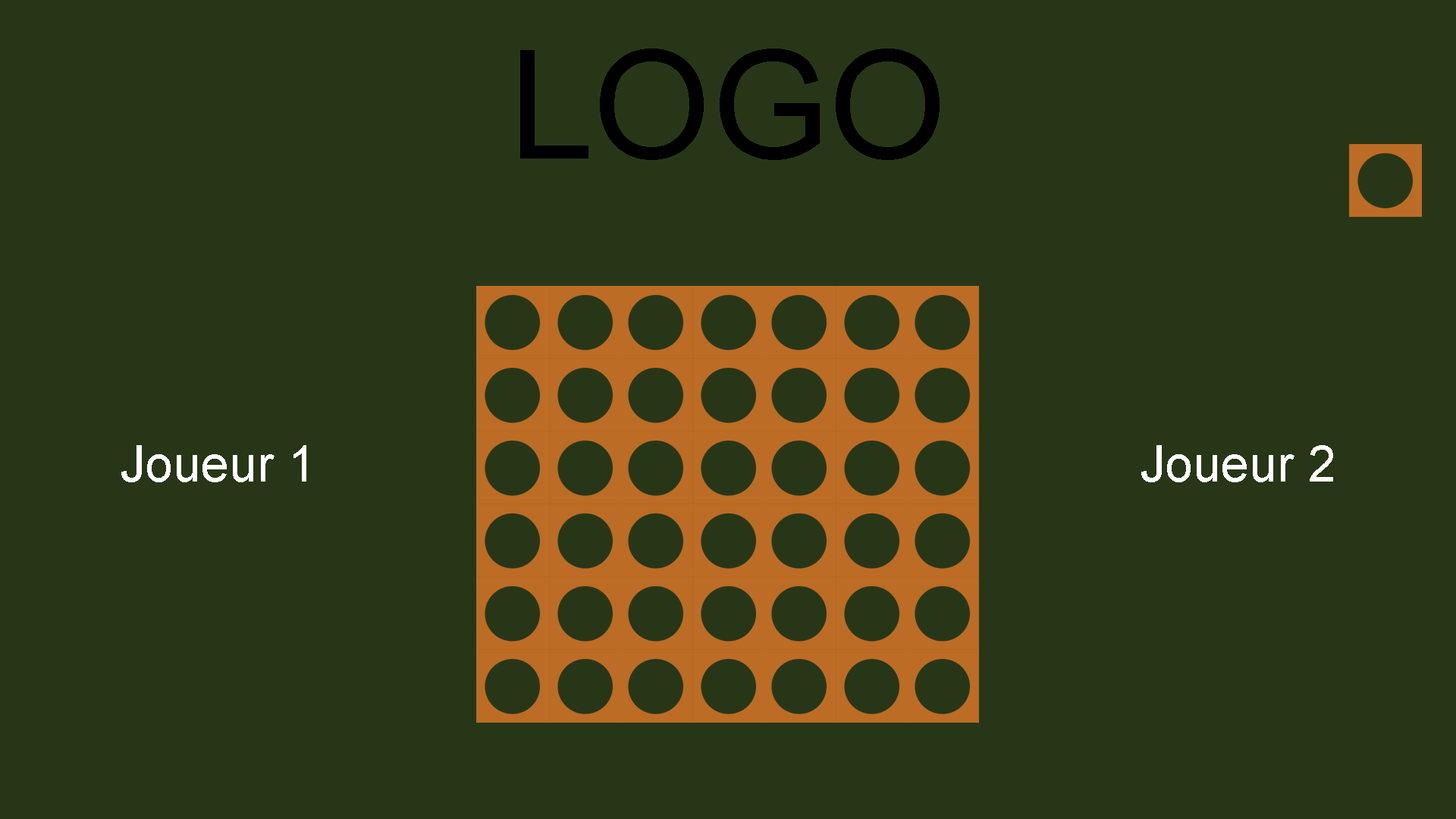
<style>
.page{position:relative;width:1456px;height:819px;background:#283618}
.page>*{position:absolute;margin:0}
.t1{font:151.7px "ArialMT";color:#000000}
.t2{font:50.6px "ArialMT";color:#ffffff}
</style>
<div class="page">
<p class="t1" style="left:520px;top:49px;width:420px;height:111px">LOGO</p>
<p class="t2" style="left:121px;top:445px;width:185px;height:37px">Joueur 1</p>
<p class="t2" style="left:1141px;top:445px;width:192px;height:37px">Joueur 2</p>
</div>
